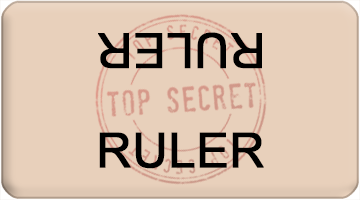
<style>
.page{position:relative;width:360px;height:200px;background:#e8d0bb}
.page>*{position:absolute;margin:0}
.t1{font:48px "ArialMT";color:#000000;font-weight:bold}
</style>
<div class="page">
<p class="t1" style="left:98px;top:32px;width:164px;height:37px;rotate:180deg">RULER</p>
<p class="t1" style="left:99px;top:132px;width:165px;height:37px">RULER</p>
</div>
